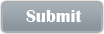
<style>
.page{position:relative;width:104px;height:34px}
.page>*{position:absolute;margin:0}
.t1{font:18px "BritannicBold";color:#ffffff}
</style>
<div class="page">
<p class="t1" style="left:26px;top:10px;width:56px;height:12px">Submit</p>
</div>
